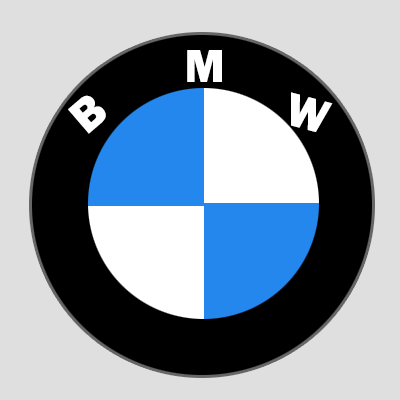
<style>
.page{position:relative;width:400px;height:400px;background:#dfdfdf}
.page>*{position:absolute;margin:0}
.t1{font:48px "FranklinGothic-Heavy";color:#ffffff}
</style>
<div class="page">
<p class="t1" style="left:187px;top:50px;width:35px;height:32px">M</p>
<p class="t1" style="left:68px;top:95px;width:38px;height:39px;rotate:-41deg">B</p>
<p class="t1" style="left:291px;top:92px;width:42px;height:40px;rotate:15deg">W</p>
</div>
